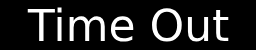
<style>
.page{position:relative;width:256px;height:50px;background:#000000}
.page>*{position:absolute;margin:0}
.t1{font:44px "DejaVuSans";color:#ffffff}
</style>
<div class="page">
<p class="t1" style="left:27px;top:7px;width:202px;height:35px">Time Out</p>
</div>
